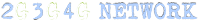
<style>
.page{position:relative;width:200px;height:23px;background:#ffffff}
.page>*{position:absolute;margin:0}
.t1{font:19.7px "MomsTypewriter";color:#b3d1ff}
</style>
<div class="page">
<p class="t1" style="left:2px;top:3px;width:12px;height:16px">2</p>
<p class="t1" style="left:32px;top:3px;width:11px;height:16px">3</p>
<p class="t1" style="left:63px;top:3px;width:11px;height:16px">4</p>
<p class="t1" style="left:99px;top:3px;width:98px;height:16px">NETWORK</p>
</div>
